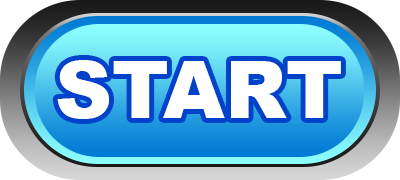
<style>
.page{position:relative;width:400px;height:180px}
.page>*{position:absolute;margin:0}
.t1{font:79.2px "Arial-Black";color:#ffffff}
</style>
<div class="page">
<p class="t1" style="left:57px;top:60px;width:284px;height:59px">START</p>
</div>
